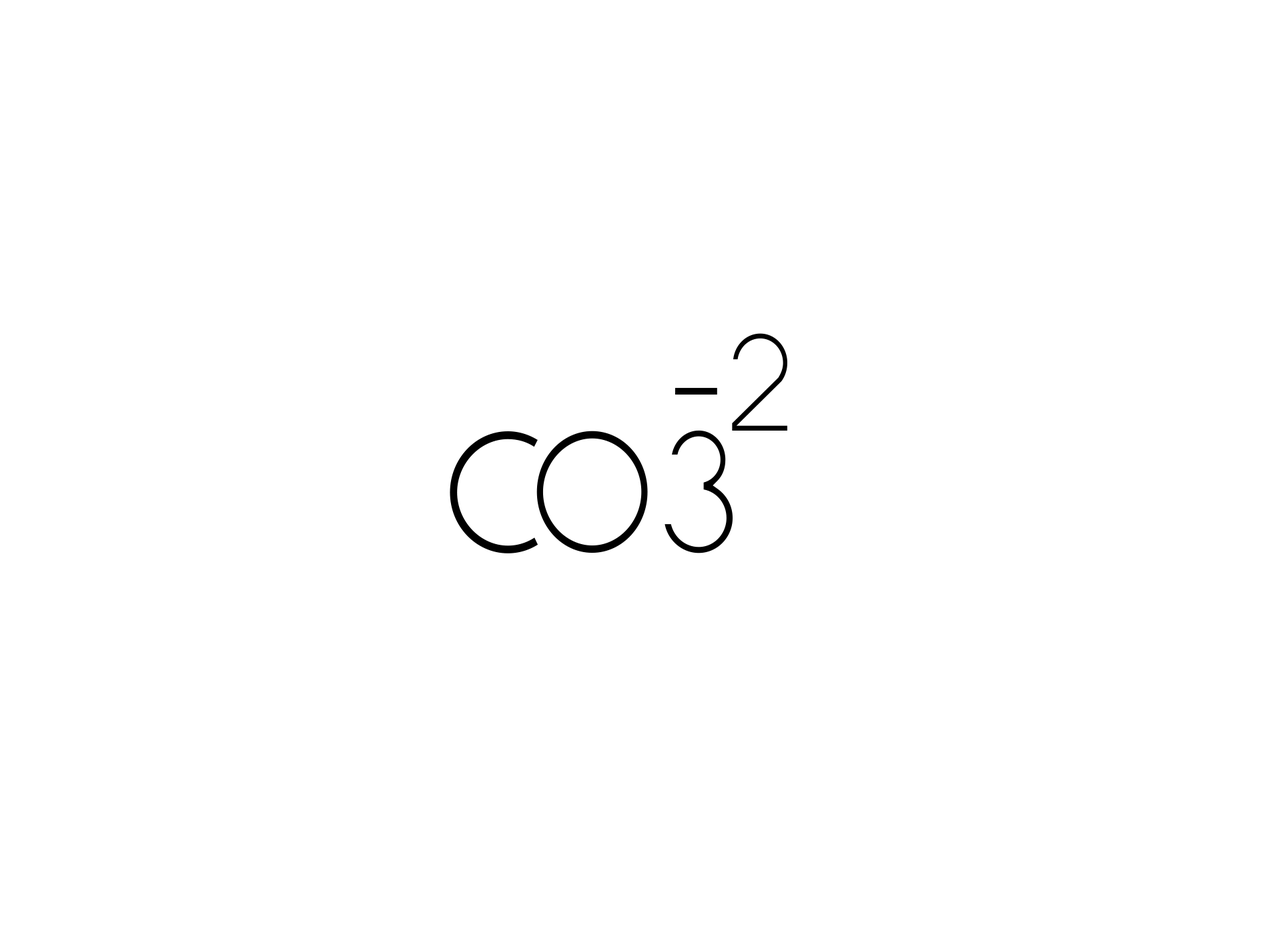
<style>
.page{position:relative;width:1261px;height:946px;background:#ffffff}
.page>*{position:absolute;margin:0}
.t1{font:138.9px "Alcubierre";color:#000000;scale:0.95 1}
.t2{font:162.1px "Alcubierre";color:#000000;scale:0.95 1}
.t3{font:173.6px "Alcubierre";color:#000000;scale:0.95 1}
</style>
<div class="page">
<p class="t1" style="left:732px;top:333px;width:55px;height:97px">2</p>
<p class="t2" style="left:675px;top:388px;width:42px;height:6px">-</p>
<p class="t3" style="left:450px;top:430px;width:283px;height:123px">CO3</p>
</div>
